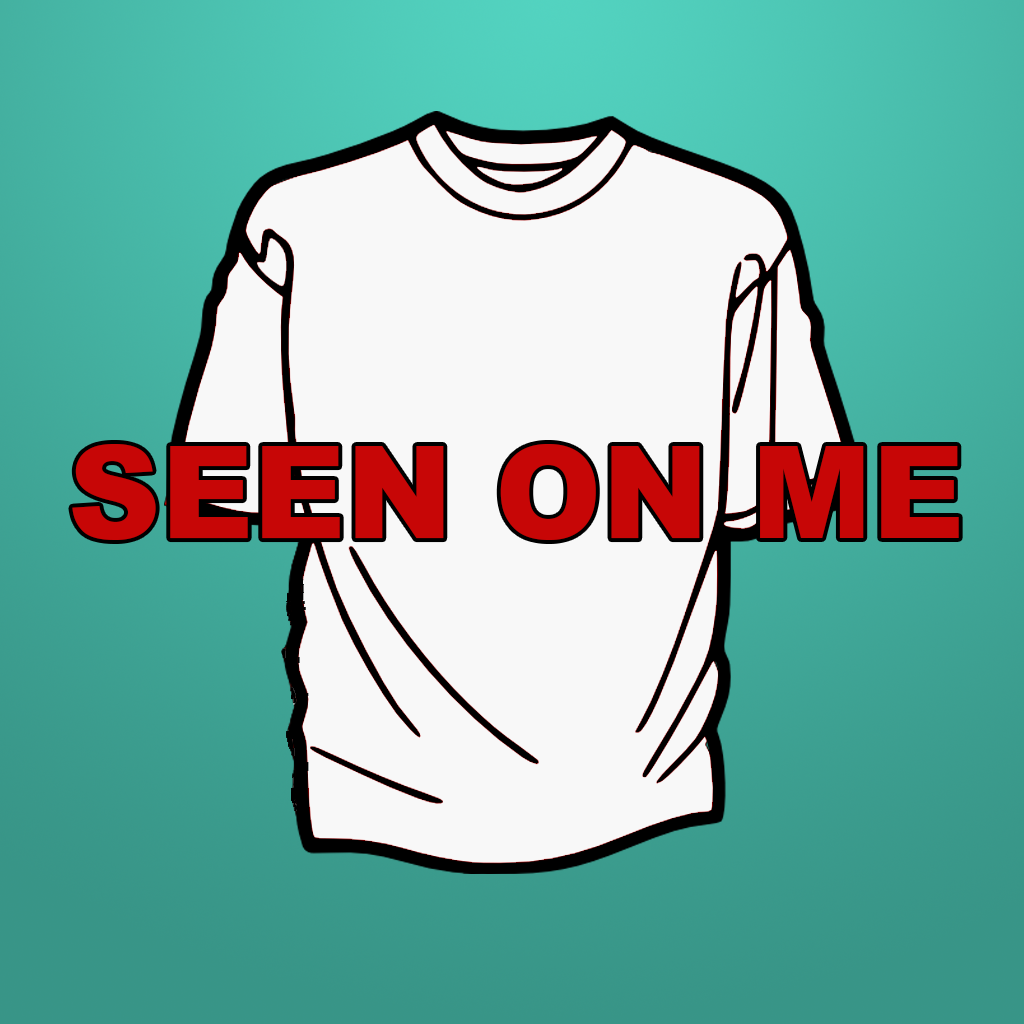
<style>
.page{position:relative;width:1024px;height:1024px;background:#f8f8f8}
.page>*{position:absolute;margin:0}
.t1{font:128px "Arial-Black";color:#c70606}
</style>
<div class="page">
<p class="t1" style="left:72px;top:444px;width:887px;height:96px">SEEN ON ME</p>
</div>
